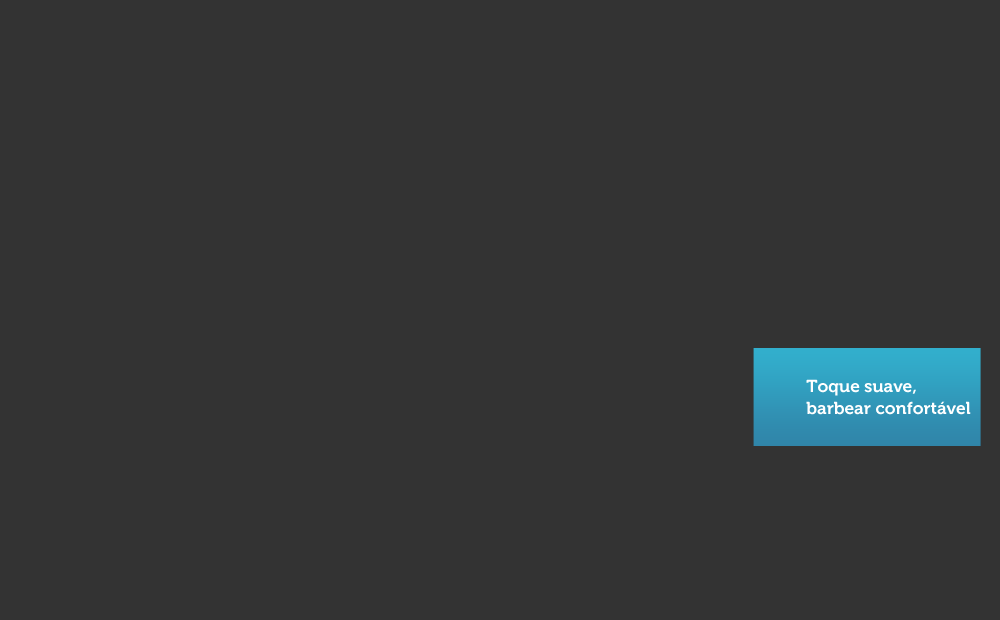
<style>
.page{position:relative;width:1000px;height:620px;background:#333333}
.page>*{position:absolute;margin:0}
.t1{font:17.3px/22.1px "Museo-700";color:#ffffff}
</style>
<div class="page">
<p class="t1" style="left:806px;top:379px;width:165px;height:36px">Toque suave, barbear confortável</p>
</div>
